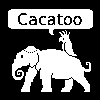
<style>
.page{position:relative;width:100px;height:100px;background:#000000}
.page>*{position:absolute;margin:0}
.t1{font:16px "DejaVuSans";color:#000000}
</style>
<div class="page">
<p class="t1" style="left:17px;top:13px;width:65px;height:13px">Cacatoo</p>
</div>
